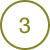
<style>
.page{position:relative;width:50px;height:50px;background:#ffffff}
.page>*{position:absolute;margin:0}
.t1{font:22px "Helvetica";color:#838329}
</style>
<div class="page">
<p class="t1" style="left:19px;top:17px;width:11px;height:17px">3</p>
</div>
